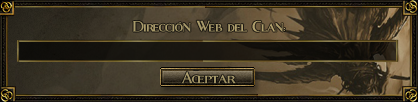
<style>
.page{position:relative;width:418px;height:102px}
.page>*{position:absolute;margin:0}
.t1{font:28.9px "Fleet-Street";color:#a89a6a;scale:0.94 1}
.t2{font:30px "Fleet-Street";color:#a19466}
</style>
<div class="page">
<p class="t1" style="left:133px;top:20px;width:152px;height:12px">Dirección Web del Clan:</p>
<p class="t2" style="left:181px;top:71px;width:55px;height:13px">Aceptar</p>
</div>
